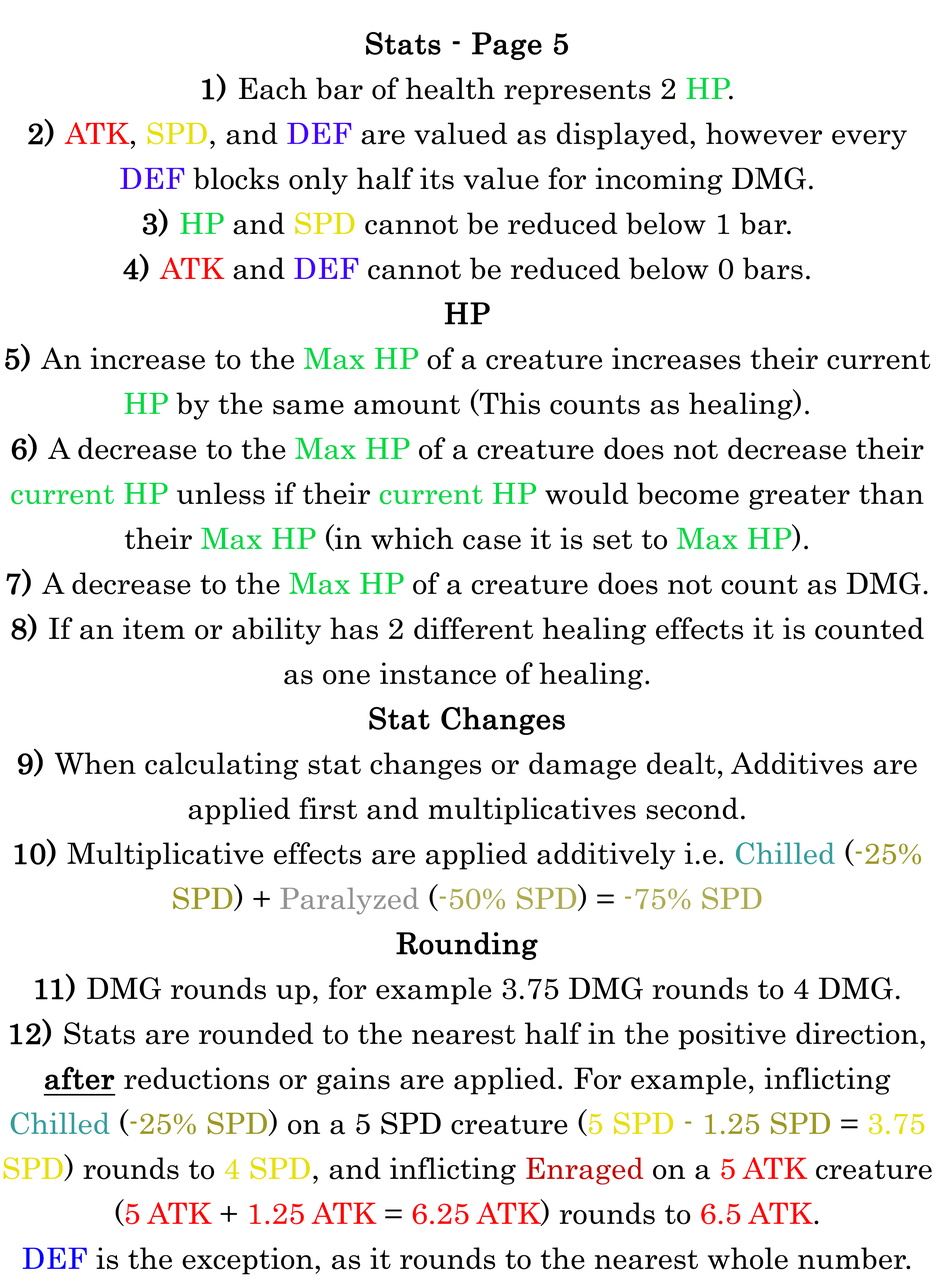
<style>
.page{position:relative;width:934px;height:1277px;background:#ffffff}
.page>*{position:absolute;margin:0}
.t1{font:50px/45px "Century";color:#000000;scale:1.04 1}
.t2{font:50px/45px "Century";color:#000000;font-weight:bold;scale:1.04 1}
.t3{font:50px/45px "Century";color:#00d942;scale:1.04 1}
.t4{font:50px/45px "Century";color:#ff0000;scale:1.04 1}
.t5{font:50px/45px "Century";color:#e8e000;scale:1.04 1}
.t6{font:50px/45px "Century";color:#4200ff;scale:1.04 1}
.t7{font:50px/45px "Century";color:#359e9d;scale:1.04 1}
.t8{font:50px/45px "Century";color:#9d9921;scale:1.04 1}
.t9{font:50px/45px "Century";color:#939393;scale:1.04 1}
.t10{font:50px/45px "Century";color:#afac50;scale:1.04 1}
.t11{font:50px/45px "Century";color:#000000;font-weight:bold;text-decoration:underline;scale:1.04 1}
.t12{font:50px/45px "Century";color:#c50000;scale:1.04 1}
.t13{font:50px/45px "Century";color:#0600ff;scale:1.04 1}
</style>
<div class="page">
<p class="t1" style="left:3px;top:32px;width:928px;height:1243px;text-align:center"><span class="t2">Stats - Page 5<br>1) </span>Each bar of health represents 2 <span class="t3">HP</span>.<br><span class="t2">2) </span><span class="t4">ATK</span>, <span class="t5">SPD</span>, and <span class="t6">DEF</span> are valued as displayed, however every <span class="t6">DEF</span> blocks only half its value for incoming DMG.<br><span class="t2">3) </span><span class="t3">HP </span>and <span class="t5">SPD</span> cannot be reduced below 1 bar.<br><span class="t2">4) </span><span class="t4">ATK</span> and <span class="t6">DEF</span> cannot be reduced below 0 bars.<br><span class="t2">HP<br>5) </span>An increase to the <span class="t3">Max HP</span> of a creature increases their current <span class="t3">HP</span> by the same amount (This counts as healing).<br><span class="t2">6) </span>A decrease to the <span class="t3">Max HP</span> of a creature does not decrease their <span class="t3">current HP </span>unless if their <span class="t3">current HP</span> would become greater than their <span class="t3">Max HP</span> (in which case it is set to <span class="t3">Max HP</span>).<br><span class="t2">7) </span>A decrease to the <span class="t3">Max HP</span> of a creature does not count as DMG.<br><span class="t2">8) </span>If an item or ability has 2 different healing effects it is counted as one instance of healing.<br><span class="t2">Stat Changes<br>9) </span>When calculating stat changes or damage dealt, Additives are applied first and multiplicatives second.<br><span class="t2">10) </span>Multiplicative effects are applied additively i.e. <span class="t7">Chilled </span>(<span class="t8">-25% SPD</span>) + <span class="t9">Paralyzed </span>(<span class="t10">-50% SPD</span>) = <span class="t10">-75% SPD<br></span><span class="t2">Rounding<br>11) </span>DMG rounds up, for example 3.75 DMG rounds to 4 DMG.<br><span class="t2">12) </span>Stats are rounded to the nearest half in the positive direction, <span class="t11">after</span> reductions or gains are applied. For example, inflicting <span class="t7">Chilled </span>(<span class="t8">-25% SPD</span>) on a 5 SPD creature (<span class="t5">5 SPD </span><span class="t8">- 1.25 SPD</span> = <span class="t5">3.75 SPD</span>) rounds to <span class="t5">4 SPD</span>, and inflicting <span class="t12">Enraged</span> on a <span class="t4">5 ATK</span> creature (<span class="t4">5 ATK</span> + <span class="t4">1.25 ATK</span> = <span class="t4">6.25 ATK</span>) rounds to <span class="t4">6.5 ATK</span>.<br><span class="t13">DEF</span> is the exception, as it rounds to the nearest whole number.</p>
</div>
